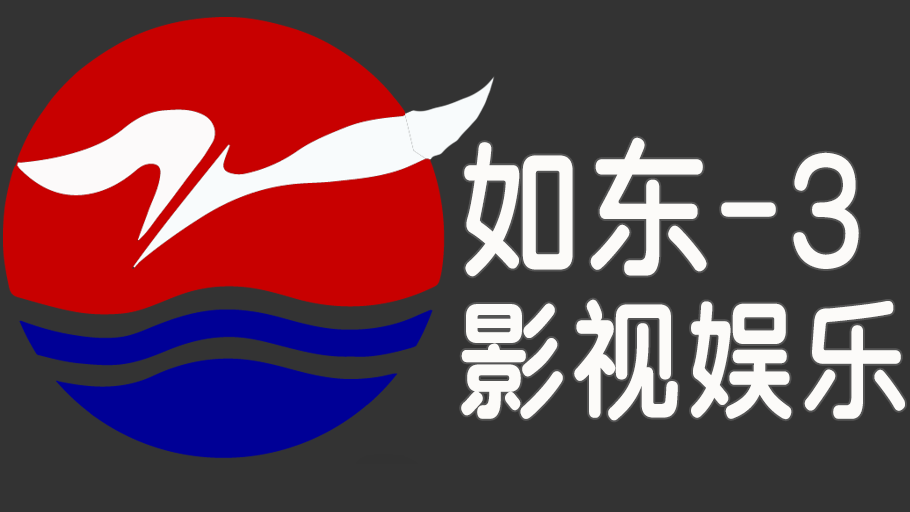
<style>
.page{position:relative;width:910px;height:512px;background:#333333}
.page>*{position:absolute;margin:0}
.t1{font:150px/160px "SJyuantijian-C-Regular";letter-spacing:0.02em;color:#fcfbf9;scale:0.85 1}
.t2{font:132px/160px "SJyuantijian-C-Regular";letter-spacing:0.02em;color:#fcfbf9;scale:0.85 1}
</style>
<div class="page">
<p class="t1" style="left:461px;top:137px;width:444px;height:284px">如东-3<br><span class="t2">影视娱乐</span></p>
</div>
